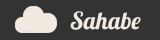
<style>
.page{position:relative;width:160px;height:40px;background:#333333}
.page>*{position:absolute;margin:0}
.t1{font:24px "Lobster";color:#f2e9e1}
</style>
<div class="page">
<p class="t1" style="left:70px;top:11px;width:71px;height:19px">Sahabe</p>
</div>
